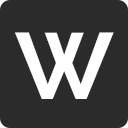
<style>
.page{position:relative;width:128px;height:128px;background:#2c2b2b}
.page>*{position:absolute;margin:0}
.t1{font:93.6px "Raleway-Bold";color:#ffffff}
</style>
<div class="page">
<p class="t1" style="left:15px;top:32px;width:99px;height:67px">W</p>
</div>
